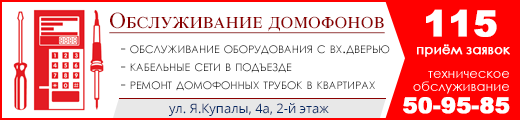
<style>
.page{position:relative;width:520px;height:120px;background:#ffffff}
.page>*{position:absolute;margin:0}
.t1{font:23px "TimesNewRomanPSMT";color:#8b0000;font-variant:small-caps;text-decoration:underline}
.t2{font:36px "Arial-Black";color:#ffffff;font-variant:small-caps;font-weight:bold}
.t3{font:15px "CenturyGothic";font-variant:small-caps}
.t4{font:13px "CenturyGothic";color:#ffffff;font-weight:bold}
.t5{font:13px/13px "CenturyGothic";color:#ffffff}
.t6{font:22px "Arial-Black";color:#ffffff;font-variant:small-caps;font-weight:bold}
.t7{font:13px "OpenSans";color:#032763}
</style>
<div class="page">
<p class="t1" style="left:109px;top:12px;width:276px;height:22px">Обслуживание домофонов</p>
<p class="t2" style="left:426px;top:9px;width:71px;height:28px">115</p>
<p class="t3" style="left:121px;top:45px;width:269px;height:46px">- обслуживание оборудования с вх.дверью<br>- кабельные сети в подъезде<br>- ремонт домофонных трубок в квартирах</p>
<p class="t4" style="left:417px;top:44px;width:93px;height:13px">приём заявок</p>
<p class="t5" style="left:413px;top:71px;width:96px;height:23px;text-align:right">техническое обслуживание</p>
<p class="t6" style="left:403px;top:97px;width:107px;height:17px">50-95-85</p>
<p class="t7" style="left:169px;top:103px;width:160px;height:13px">ул. Я.Купалы, 4а, 2-й этаж</p>
</div>
